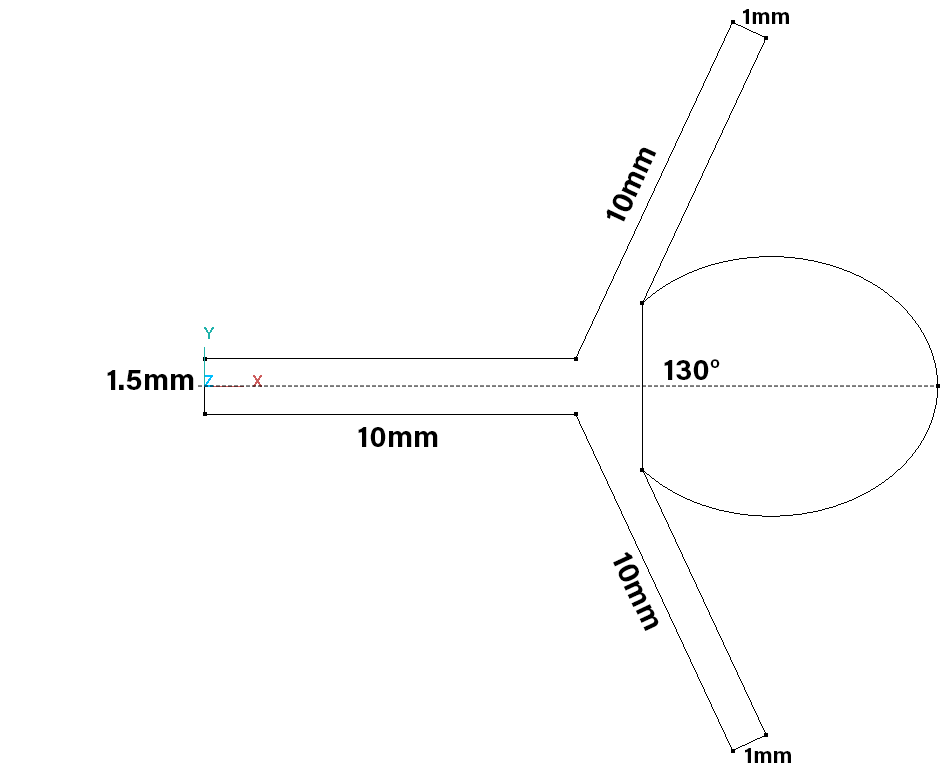
<style>
.page{position:relative;width:945px;height:775px;background:#ffffff}
.page>*{position:absolute;margin:0}
.t1{font:22.7px "AcuminPro-Bold";color:#000000}
.t2{font:30.2px "AcuminPro-Bold";color:#000000}
</style>
<div class="page">
<p class="t1" style="left:743px;top:9px;width:46px;height:15px">1mm</p>
<p class="t2" style="left:606px;top:147px;width:51px;height:75px;rotate:-65deg">10mm</p>
<p class="t2" style="left:664px;top:359px;width:56px;height:21px">130°</p>
<p class="t2" style="left:107px;top:370px;width:87px;height:20px">1.5mm</p>
<p class="t2" style="left:358px;top:427px;width:80px;height:20px">10mm</p>
<p class="t2" style="left:613px;top:552px;width:46px;height:79px;rotate:65deg">10mm</p>
<p class="t1" style="left:745px;top:748px;width:46px;height:15px">1mm</p>
</div>
